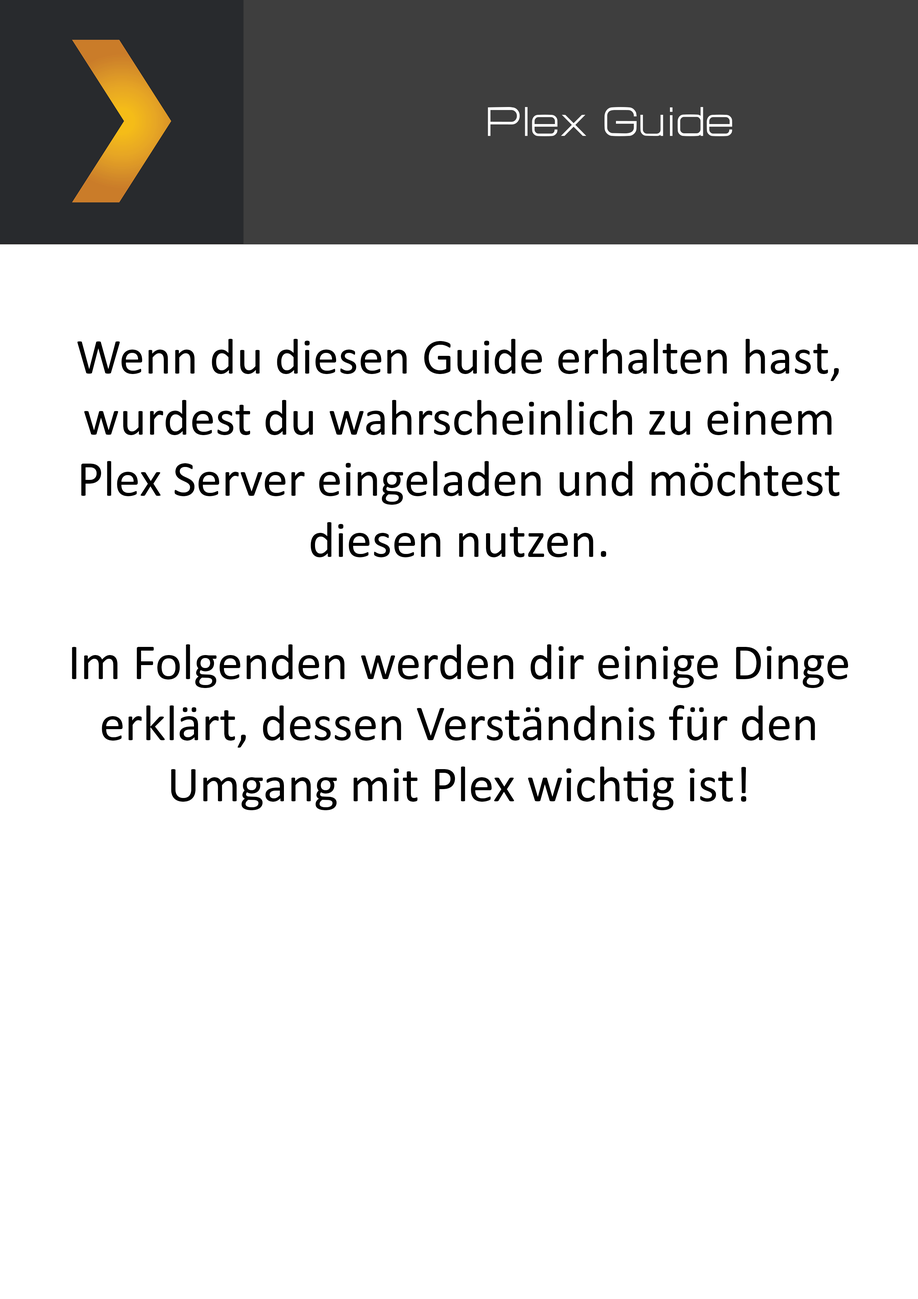
<style>
.page{position:relative;width:918px;height:1299px;background:#ffffff}
.page>*{position:absolute;margin:0}
.t1{font:50.9px "HURTMOLDPersonalUse-Regular";color:#ffffff}
.t2{font:50.9px "Calibri";color:#000000}
</style>
<div class="page">
<p class="t1" style="left:488px;top:107px;width:244px;height:29px">Plex Guide</p>
<p class="t2" style="left:72px;top:339px;width:777px;height:471px;text-align:center">Wenn du diesen Guide erhalten hast,<br>wurdest du wahrscheinlich zu einem<br>Plex Server eingeladen und möchtest<br>diesen nutzen.<br><br>Im Folgenden werden dir einige Dinge<br>erklärt, dessen Verständnis für den<br>Umgang mit Plex wichtig ist!</p>
</div>
